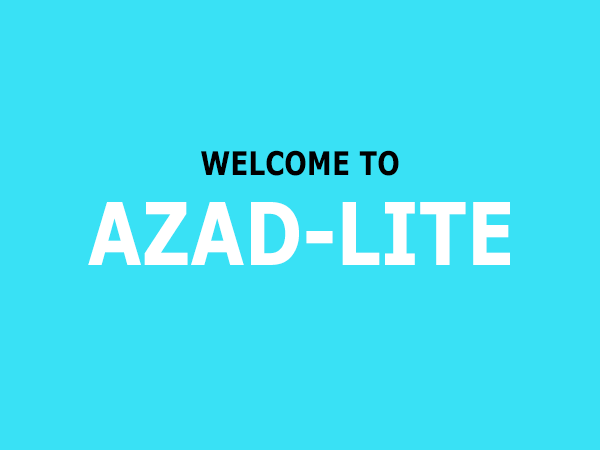
<style>
.page{position:relative;width:600px;height:450px;background:#39e1f5}
.page>*{position:absolute;margin:0}
.t1{font:32.8px "Verdana-Bold";color:#000000;text-transform:uppercase;scale:0.81 1}
.t2{font:86.5px "Verdana-Bold";color:#ffffff;text-transform:uppercase;scale:0.81 1}
</style>
<div class="page">
<p class="t1" style="left:201px;top:150px;width:198px;height:26px">welcome to</p>
<p class="t2" style="left:88px;top:202px;width:422px;height:63px">AZAD-Lite</p>
</div>
